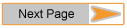
<style>
.page{position:relative;width:127px;height:28px;background:#c6c6c6}
.page>*{position:absolute;margin:0}
.t1{font:12px "ArialMT";color:#020202}
</style>
<div class="page">
<p class="t1" style="left:19px;top:9px;width:55px;height:12px">Next Page</p>
</div>
